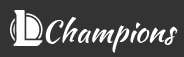
<style>
.page{position:relative;width:184px;height:57px;background:#333333}
.page>*{position:absolute;margin:0}
.t1{font:30px "KaushanScript-Regular";color:#ffffff}
</style>
<div class="page">
<p class="t1" style="left:45px;top:17px;width:133px;height:36px">Champions</p>
</div>
